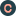
<style>
.page{position:relative;width:16px;height:16px;background:#22404a}
.page>*{position:absolute;margin:0}
.t1{font:11px "Gulim";color:#ffa896;font-weight:bold}
</style>
<div class="page">
<p class="t1" style="left:4px;top:4px;width:8px;height:9px">C</p>
</div>
